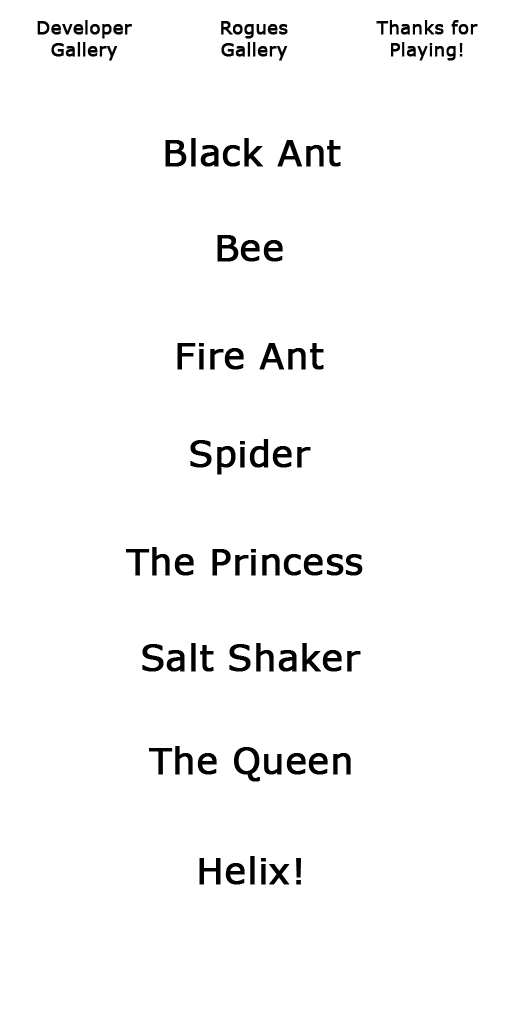
<style>
.page{position:relative;width:512px;height:1024px;background:#ffffff}
.page>*{position:absolute;margin:0}
.t1{font:18px "Verdana";color:#000000;font-weight:bold}
.t2{font:36px "Verdana";color:#000000;font-weight:bold}
</style>
<div class="page">
<p class="t1" style="left:37px;top:20px;width:95px;height:41px;text-align:center">Developer<br>Gallery</p>
<p class="t1" style="left:221px;top:21px;width:67px;height:40px;text-align:center">Rogues<br>Gallery</p>
<p class="t1" style="left:376px;top:20px;width:102px;height:41px;text-align:center">Thanks for<br>Playing!</p>
<p class="t2" style="left:165px;top:138px;width:176px;height:29px">Black Ant</p>
<p class="t2" style="left:217px;top:235px;width:66px;height:27px">Bee</p>
<p class="t2" style="left:177px;top:343px;width:147px;height:27px">Fire Ant</p>
<p class="t2" style="left:190px;top:439px;width:121px;height:36px">Spider</p>
<p class="t2" style="left:126px;top:547px;width:237px;height:29px">The Princess</p>
<p class="t2" style="left:142px;top:643px;width:219px;height:29px">Salt Shaker</p>
<p class="t2" style="left:149px;top:746px;width:202px;height:36px">The Queen</p>
<p class="t2" style="left:199px;top:856px;width:102px;height:29px">Helix!</p>
</div>
